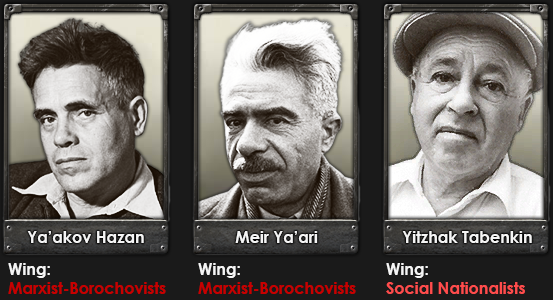
<style>
.page{position:relative;width:553px;height:300px}
.page>*{position:absolute;margin:0}
.t1{font:16px "CenturyGothic-Bold";color:#f5f5f5}
.t2{font:16px "CenturyGothic-Bold";color:#c80000}
.t3{font:16px "CenturyGothic-Bold";color:#ff4c4c}
</style>
<div class="page">
<p class="t1" style="left:27px;top:231px;width:117px;height:12px">Ya’akov Hazan</p>
<p class="t1" style="left:235px;top:231px;width:83px;height:12px">Meir Ya’ari</p>
<p class="t1" style="left:402px;top:231px;width:130px;height:12px">Yitzhak Tabenkin</p>
<p class="t2" style="left:8px;top:263px;width:158px;height:31px"><span class="t1">Wing: <br></span>Marxist-Borochovists</p>
<p class="t2" style="left:198px;top:263px;width:158px;height:31px"><span class="t1">Wing: <br></span>Marxist-Borochovists</p>
<p class="t3" style="left:386px;top:263px;width:139px;height:31px"><span class="t1">Wing: <br></span>Social Nationalists</p>
</div>
